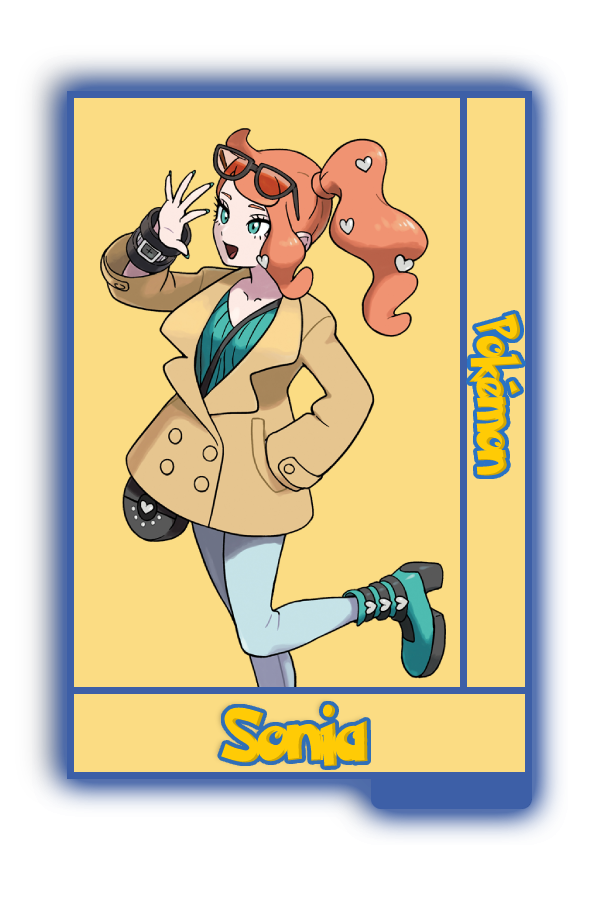
<style>
.page{position:relative;width:600px;height:900px;background:#fbdc83}
.page>*{position:absolute;margin:0}
.t1{font:48.8px "PokemonSolidNormal";color:#ffcb05;scale:0.8 1}
.t2{font:60.1px "PokemonSolidNormal";color:#ffcb05;scale:0.96 1}
</style>
<div class="page">
<p class="t1" style="left:469px;top:313px;width:54px;height:163px;rotate:90deg">Pokémon</p>
<p class="t2" style="left:221px;top:704px;width:147px;height:63px">Sonia</p>
</div>
